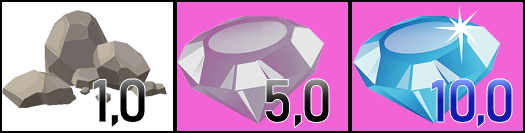
<style>
.page{position:relative;width:525px;height:133px;background:#f263d5}
.page>*{position:absolute;margin:0}
.t1{font:60px "Bahnschrift-SemiBold";letter-spacing:-0.05em}
</style>
<div class="page">
<p class="t1" style="left:93px;top:79px;width:52px;height:49px">1,0</p>
<p class="t1" style="left:265px;top:79px;width:64px;height:49px">5,0</p>
<p class="t1" style="left:431px;top:79px;width:81px;height:49px">10,0</p>
</div>
